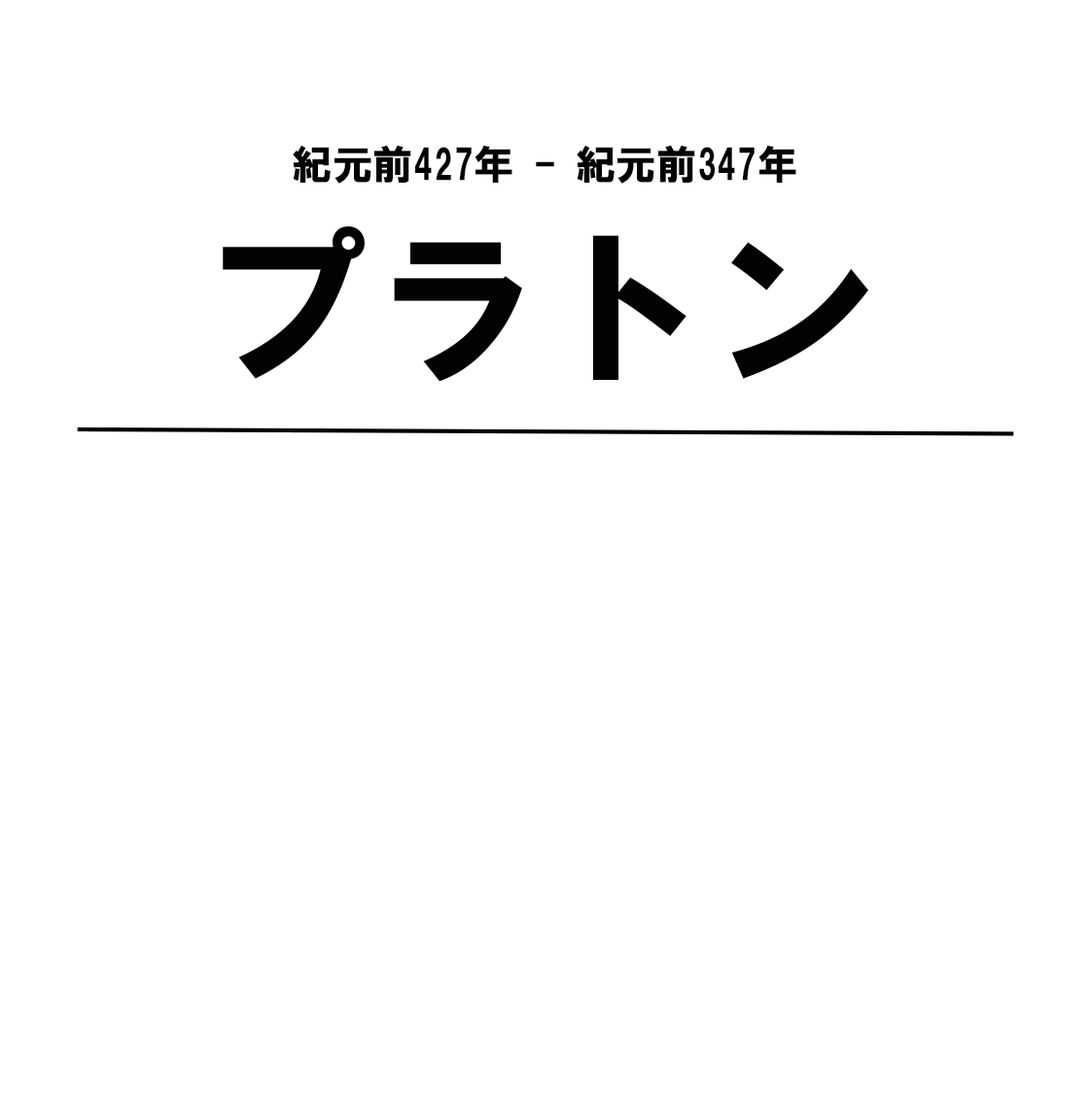
<style>
.page{position:relative;width:1091px;height:1093px;background:#ffffff}
.page>*{position:absolute;margin:0}
.t1{font:40.5px "HGSoeiKakugothicUB";color:#020202}
.t2{font:170.1px "HGSoeiKakugothicUB";color:#020202}
</style>
<div class="page">
<p class="t1" style="left:293px;top:145px;width:503px;height:39px">紀元前427年 - 紀元前347年</p>
<p class="t2" style="left:223px;top:226px;width:645px;height:156px">プラトン</p>
</div>
